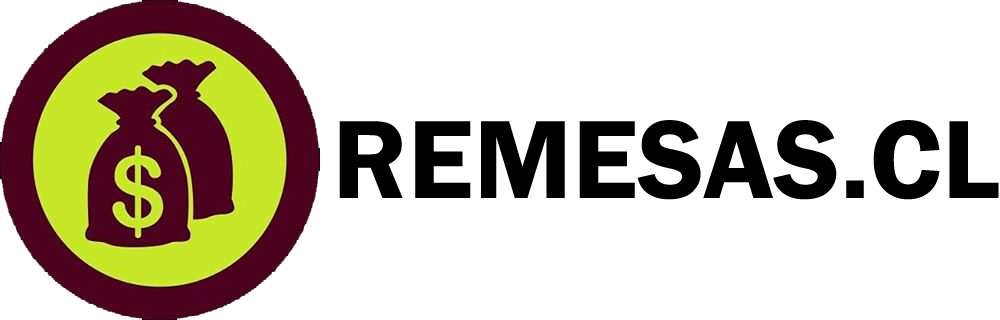
<style>
.page{position:relative;width:1000px;height:320px;background:#ffffff}
.page>*{position:absolute;margin:0}
.t1{font:115px "FranklinGothic-Demi";color:#000000}
</style>
<div class="page">
<p class="t1" style="left:339px;top:120px;width:660px;height:80px">REMESAS.CL</p>
</div>
